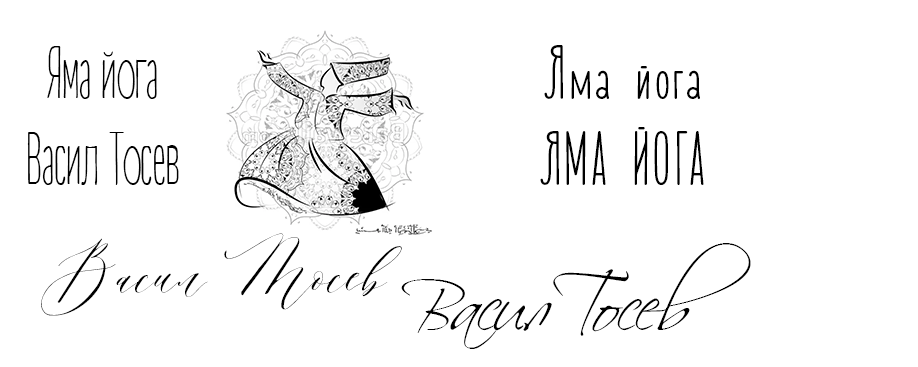
<style>
.page{position:relative;width:918px;height:367px;background:#ffffff}
.page>*{position:absolute;margin:0}
.t1{font:72px "ADAYWITHOUTSUN";color:#000000}
.t2{font:72px "MADEBarista";color:#000000}
.t3{font:100px "Caravan";color:#000000}
.t4{font:72px "Scriptina";color:#000000}
</style>
<div class="page">
<p class="t1" style="left:27px;top:46px;width:152px;height:139px;text-align:center">Яма йога<br>Васил Тосев</p>
<p class="t2" style="left:540px;top:45px;width:164px;height:140px;text-align:center">Яма йога<br>ЯМА ЙОГА</p>
<p class="t3" style="left:41px;top:233px;width:361px;height:83px">Васил Тосев</p>
<p class="t4" style="left:401px;top:243px;width:350px;height:106px">Bacu Toceb</p>
<p class="t4" style="left:523px;top:302px;width:29px;height:29px;rotate:180deg">v</p>
</div>
